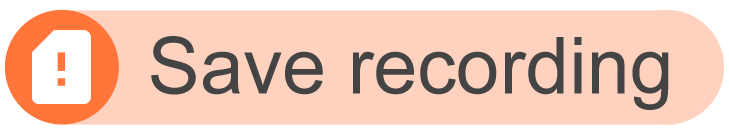
<style>
.page{position:relative;width:729px;height:136px;background:#fed2be}
.page>*{position:absolute;margin:0}
.t1{font:78.7px "ArialMT";color:#444444}
</style>
<div class="page">
<p class="t1" style="left:151px;top:36px;width:518px;height:74px">Save recording</p>
</div>
